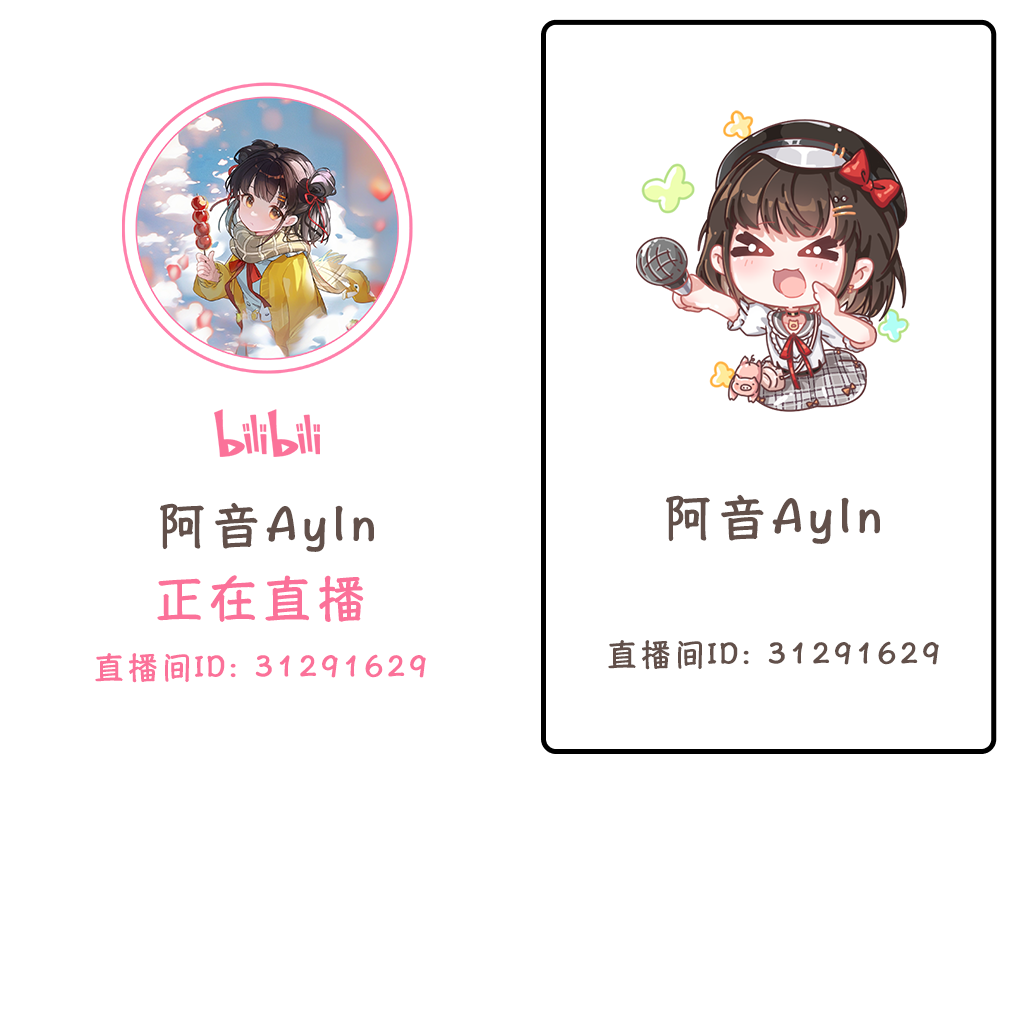
<style>
.page{position:relative;width:1025px;height:1025px;background:#ffffff}
.page>*{position:absolute;margin:0}
.t1{font:48px "HannotateTC-W5";letter-spacing:0.1em;color:#62504a;font-weight:bold}
.t2{font:48px "HannotateTC-W5";letter-spacing:0.1em;color:#fb7199;font-weight:bold}
.t3{font:30px "HannotateTC-W5";letter-spacing:0.1em;color:#62504a;font-weight:bold}
.t4{font:30px "HannotateTC-W5";letter-spacing:0.1em;color:#fb7199;font-weight:bold}
</style>
<div class="page">
<p class="t1" style="left:666px;top:494px;width:214px;height:50px">阿音Ayln</p>
<p class="t1" style="left:160px;top:502px;width:214px;height:50px">阿音Ayln</p>
<p class="t2" style="left:157px;top:575px;width:207px;height:47px">正在直播</p>
<p class="t3" style="left:608px;top:640px;width:331px;height:30px">直播间ID: 31291629</p>
<p class="t4" style="left:95px;top:653px;width:331px;height:30px">直播间ID: 31291629</p>
</div>
